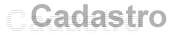
<style>
.page{position:relative;width:175px;height:35px;background:#ffffff}
.page>*{position:absolute;margin:0}
.t1{font:31.8px "Arial-BoldMT";color:#b2b2b2}
</style>
<div class="page">
<p class="t1" style="left:31px;top:4px;width:136px;height:24px">Cadastro</p>
</div>
